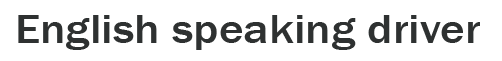
<style>
.page{position:relative;width:502px;height:61px;background:#ffffff}
.page>*{position:absolute;margin:0}
.t1{font:41.8px "FranklinGothic-Medium";color:#2e3131;scale:1.13 1}
</style>
<div class="page">
<p class="t1" style="left:18px;top:15px;width:462px;height:35px">English speaking driver</p>
</div>
